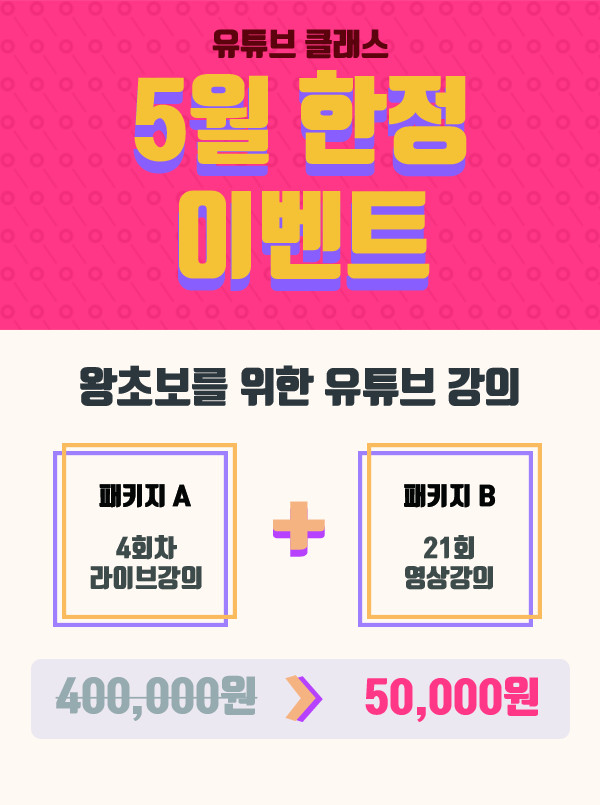
<style>
.page{position:relative;width:600px;height:805px;background:#fff9f3}
.page>*{position:absolute;margin:0}
.t1{font:31.1px "TmonMonsoriBlack";color:#5c0f1a}
.t2{font:95.8px "TmonMonsoriBlack";color:#f5c135}
.t3{font:95.8px "TmonMonsoriBlack"}
.t4{font:41.2px "TmonMonsoriBlack";color:#2c373d}
.t5{font:25px "TmonMonsoriBlack";color:#040606}
.t6{font:78px "TmonMonsoriBlack";scale:1.14 1}
.t7{font:78px "TmonMonsoriBlack";color:#f5b381;scale:1.14 1}
.t8{font:25px "TmonMonsoriBlack";color:#3e4b4b}
.t9{font:41.7px "TmonMonsoriBlack";color:#96abaf}
.t10{font:41.7px "TmonMonsoriBlack";color:#ff3786}
</style>
<div class="page">
<p class="t1" style="left:212px;top:29px;width:177px;height:30px">유튜브 클래스</p>
<p class="t2" style="left:134px;top:70px;width:333px;height:209px;text-align:center">5월 한정<br>이벤트</p>
<p class="t3" style="left:133px;top:82px;width:333px;height:209px;text-align:center">5월 한정<br>이벤트</p>
<p class="t4" style="left:80px;top:365px;width:439px;height:41px">왕초보를 위한 유튜브 강의</p>
<p class="t5" style="left:99px;top:484px;width:92px;height:24px">패키지 A</p>
<p class="t5" style="left:404px;top:484px;width:92px;height:24px">패키지 B</p>
<p class="t6" style="left:273px;top:508px;width:52px;height:49px">+</p>
<p class="t7" style="left:273px;top:501px;width:52px;height:49px">+</p>
<p class="t8" style="left:90px;top:535px;width:112px;height:55px;text-align:center">4회차<br>라이브강의</p>
<p class="t8" style="left:405px;top:535px;width:88px;height:55px;text-align:center">21회<br>영상강의</p>
<p class="t9" style="left:55px;top:675px;width:203px;height:46px">400,000원</p>
<p class="t10" style="left:365px;top:676px;width:173px;height:46px">50,000원</p>
</div>
